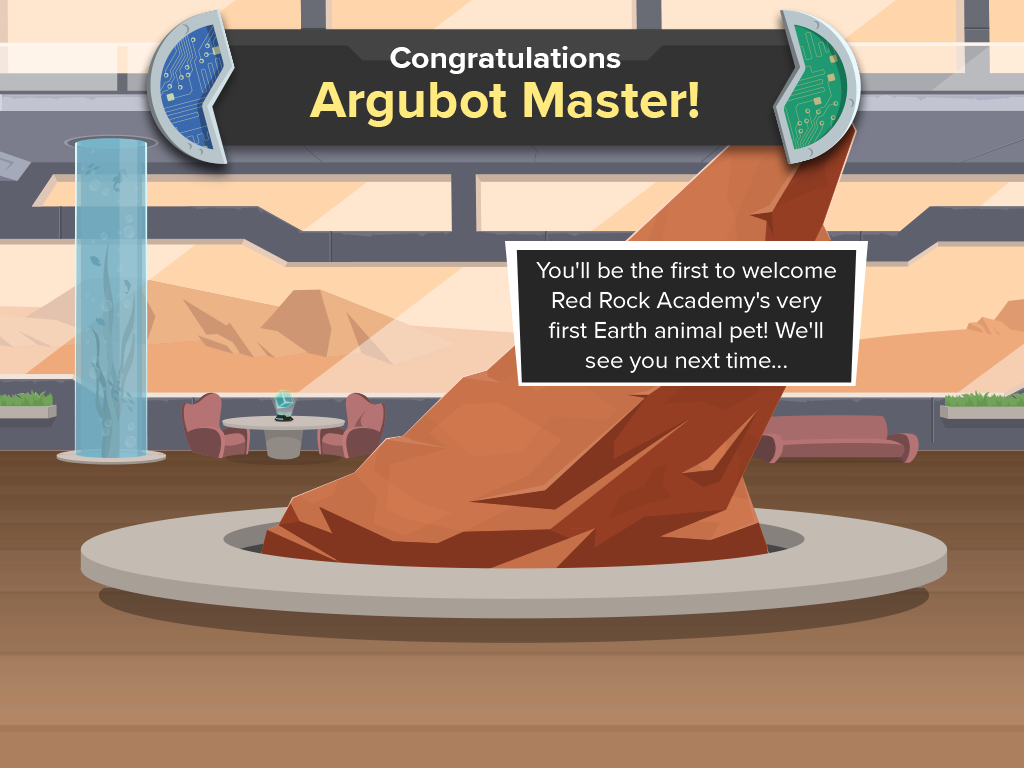
<style>
.page{position:relative;width:1024px;height:768px}
.page>*{position:absolute;margin:0}
.t1{font:31.9px "ProximaNova-Bold";color:#ffffff}
.t2{font:53.2px/48.8px "ProximaNova-Bold";color:#ffea80}
.t3{font:24px/30px "ProximaNova-Regular";color:#ffffff}
</style>
<div class="page">
<p class="t1" style="left:309px;top:46px;width:390px;height:81px;text-align:center">Congratulations<br><span class="t2">Argubot Master!</span></p>
<p class="t3" style="left:536px;top:262px;width:300px;height:111px;text-align:center">You'll be the first to welcome Red Rock Academy's very first Earth animal pet! We'll see you next time...</p>
</div>
